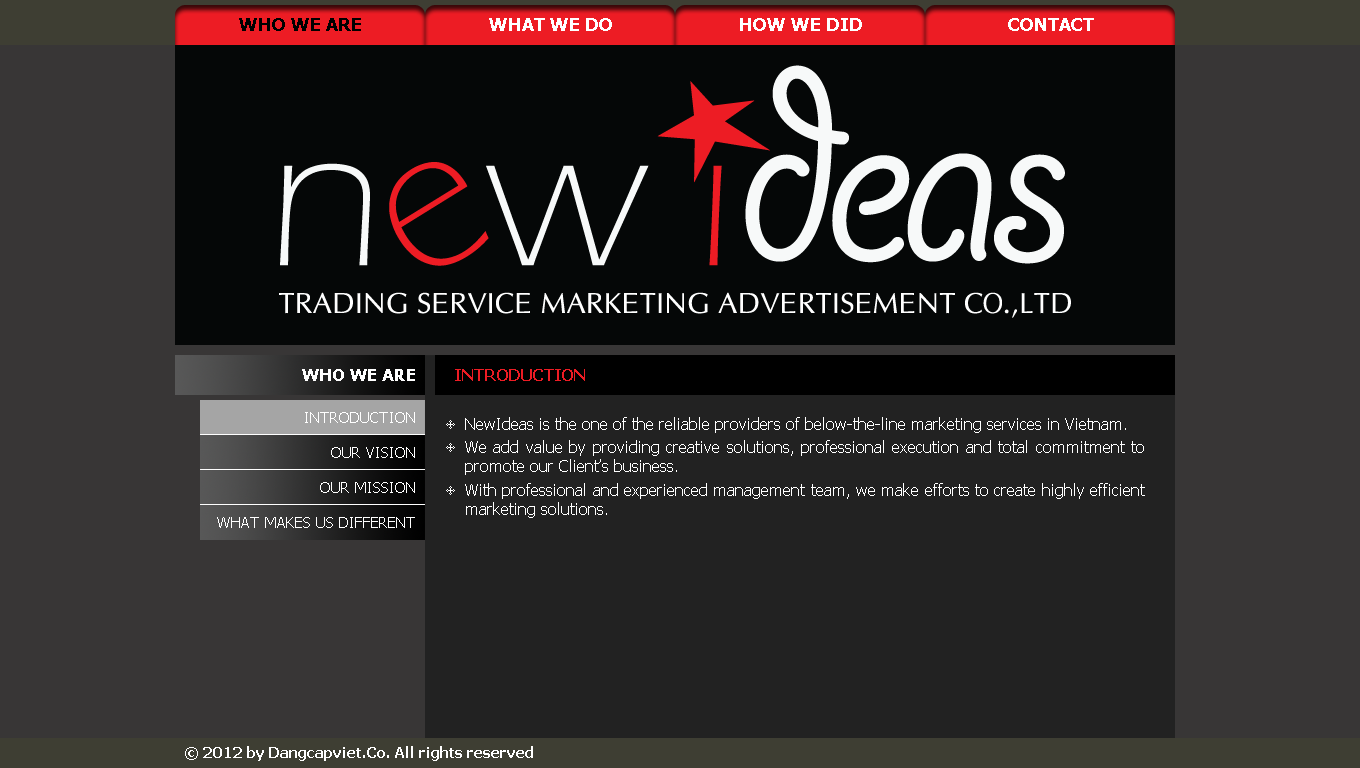
<style>
.page{position:relative;width:1360px;height:768px;background:#383636}
.page>*{position:absolute;margin:0}
.t1{font:18px "Tahoma-Bold";color:#000000}
.t2{font:18px "Tahoma-Bold";color:#ffffff}
.t3{font:17px "Tahoma-Bold";color:#ffffff}
.t4{font:16px "Tahoma-Bold";color:#ed1c24}
.t5{font:15px "Tahoma";color:#ffffff}
.t6{font:16px "Tahoma";color:#ffffff}
.t7{font:15px "Tahoma-Bold";color:#ffffff}
</style>
<div class="page">
<p class="t1" style="left:239px;top:18px;width:122px;height:13px">WHO WE ARE</p>
<p class="t2" style="left:489px;top:18px;width:123px;height:13px">WHAT WE DO</p>
<p class="t2" style="left:740px;top:18px;width:122px;height:13px">HOW WE DID</p>
<p class="t2" style="left:1008px;top:18px;width:86px;height:13px">CONTACT</p>
<p class="t3" style="left:302px;top:369px;width:113px;height:12px">WHO WE ARE</p>
<p class="t4" style="left:455px;top:369px;width:130px;height:12px">INTRODUCTION</p>
<p class="t5" style="left:305px;top:412px;width:110px;height:11px">INTRODUCTION</p>
<p class="t6" style="left:465px;top:417px;width:680px;height:101px;text-align:justify">NewIdeas is the one of the reliable providers of below-the-line marketing services in Vietnam.<br>We add value by providing creative solutions, professional execution and total commitment to promote our Client’s business. <br>With professional and experienced management team, we make efforts to create highly efficient marketing solutions.</p>
<p class="t5" style="left:331px;top:447px;width:84px;height:11px">OUR VISION</p>
<p class="t5" style="left:320px;top:482px;width:95px;height:11px">OUR MISSION</p>
<p class="t5" style="left:217px;top:517px;width:198px;height:11px">WHAT MAKES US DIFFERENT</p>
<p class="t7" style="left:185px;top:746px;width:348px;height:15px">© 2012 by Dangcapviet.Co. All rights reserved</p>
</div>
